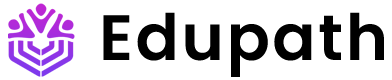
<style>
.page{position:relative;width:392px;height:80px;background:#ffffff}
.page>*{position:absolute;margin:0}
.t1{font:64px "Poppins-SemiBold";letter-spacing:0.04em;color:#000000}
</style>
<div class="page">
<p class="t1" style="left:103px;top:12px;width:281px;height:65px">Edupath</p>
</div>
